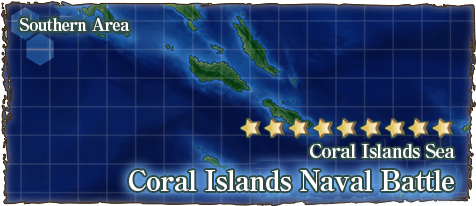
<style>
.page{position:relative;width:476px;height:206px}
.page>*{position:absolute;margin:0}
.t1{font:17px "RyuminPro-ExBold";letter-spacing:-0.04em;color:#ffffff}
.t2{font:19px "RyuminPro-ExBold";letter-spacing:-0.04em;color:#ffffff}
.t3{font:28px "RyuminPro-ExBold";letter-spacing:-0.04em;color:#ffffff}
</style>
<div class="page">
<p class="t1" style="left:19px;top:18px;width:111px;height:13px">Southern Area</p>
<p class="t2" style="left:310px;top:143px;width:145px;height:16px">Coral Islands Sea</p>
<p class="t3" style="left:129px;top:170px;width:325px;height:22px">Coral Islands Naval Battle</p>
</div>
